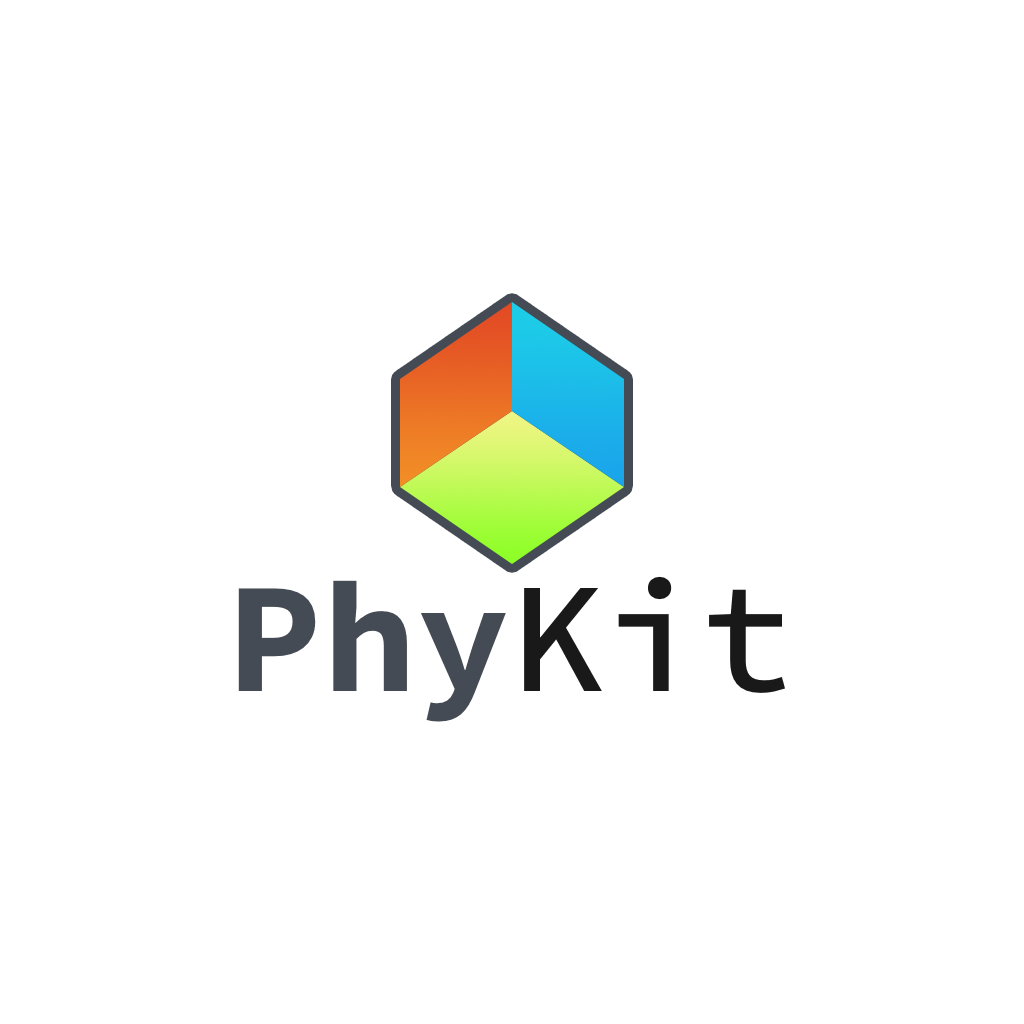
<style>
.page{position:relative;width:1024px;height:1024px;background:#ffffff}
.page>*{position:absolute;margin:0}
.t1{font:157.2px "SourceCodePro-Bold";color:#454b54}
.t2{font:157.2px "SourceCodePro-Medium";color:#191919}
</style>
<div class="page">
<p class="t1" style="left:238px;top:576px;width:547px;height:146px">Phy<span class="t2">Kit</span></p>
</div>
